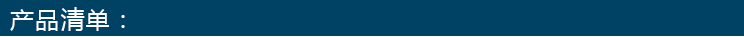
<style>
.page{position:relative;width:744px;height:37px;background:#004263}
.page>*{position:absolute;margin:0}
.t1{font:24px "MicrosoftYaHei";letter-spacing:0.05em;color:#ffffff}
</style>
<div class="page">
<p class="t1" style="left:10px;top:7px;width:115px;height:24px">产品清单：</p>
</div>
